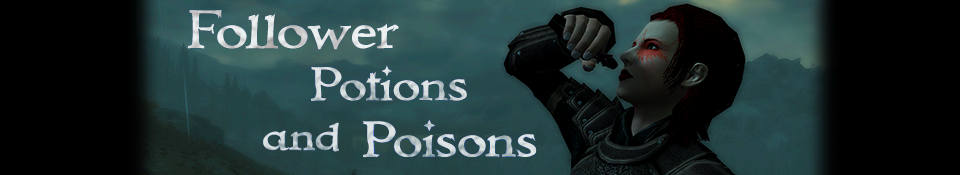
<style>
.page{position:relative;width:960px;height:175px;background:#000000}
.page>*{position:absolute;margin:0}
.t1{font:55.1px "Immortal";color:#e0e3e3}
.t2{font:47.8px "Immortal";color:#cfd6d7}
.t3{font:43px "Immortal"}
.t4{font:50.8px "Immortal";color:#cfd6d7}
</style>
<div class="page">
<p class="t1" style="left:187px;top:10px;width:212px;height:40px">Follower</p>
<p class="t1" style="left:187px;top:10px;width:212px;height:40px">Follower</p>
<p class="t2" style="left:311px;top:65px;width:156px;height:36px">Potions</p>
<p class="t2" style="left:311px;top:65px;width:156px;height:36px">Potions</p>
<p class="t3" style="left:263px;top:122px;width:76px;height:30px">and</p>
<p class="t3" style="left:263px;top:122px;width:76px;height:30px">and</p>
<p class="t4" style="left:362px;top:119px;width:175px;height:39px">Poisons</p>
<p class="t4" style="left:362px;top:119px;width:175px;height:39px">Poisons</p>
</div>
